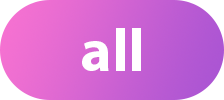
<style>
.page{position:relative;width:224px;height:100px}
.page>*{position:absolute;margin:0}
.t1{font:60px "MyriadPro-Bold";color:#ffffff}
</style>
<div class="page">
<p class="t1" style="left:82px;top:28px;width:59px;height:43px">all</p>
</div>
